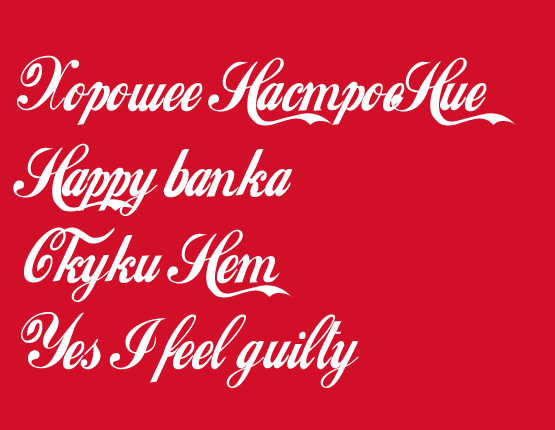
<style>
.page{position:relative;width:555px;height:430px;background:#d10f29}
.page>*{position:absolute;margin:0}
.t1{font:71.5px "LokiCola";letter-spacing:-0.005em;color:#ffffff;scale:0.9 1}
</style>
<div class="page">
<p class="t1" style="left:13px;top:55px;width:503px;height:333px">Xopowee HacmpoeHue<br>Happy banka<br>C kyku Hem<br>Yes I  feel  guilty</p>
</div>
